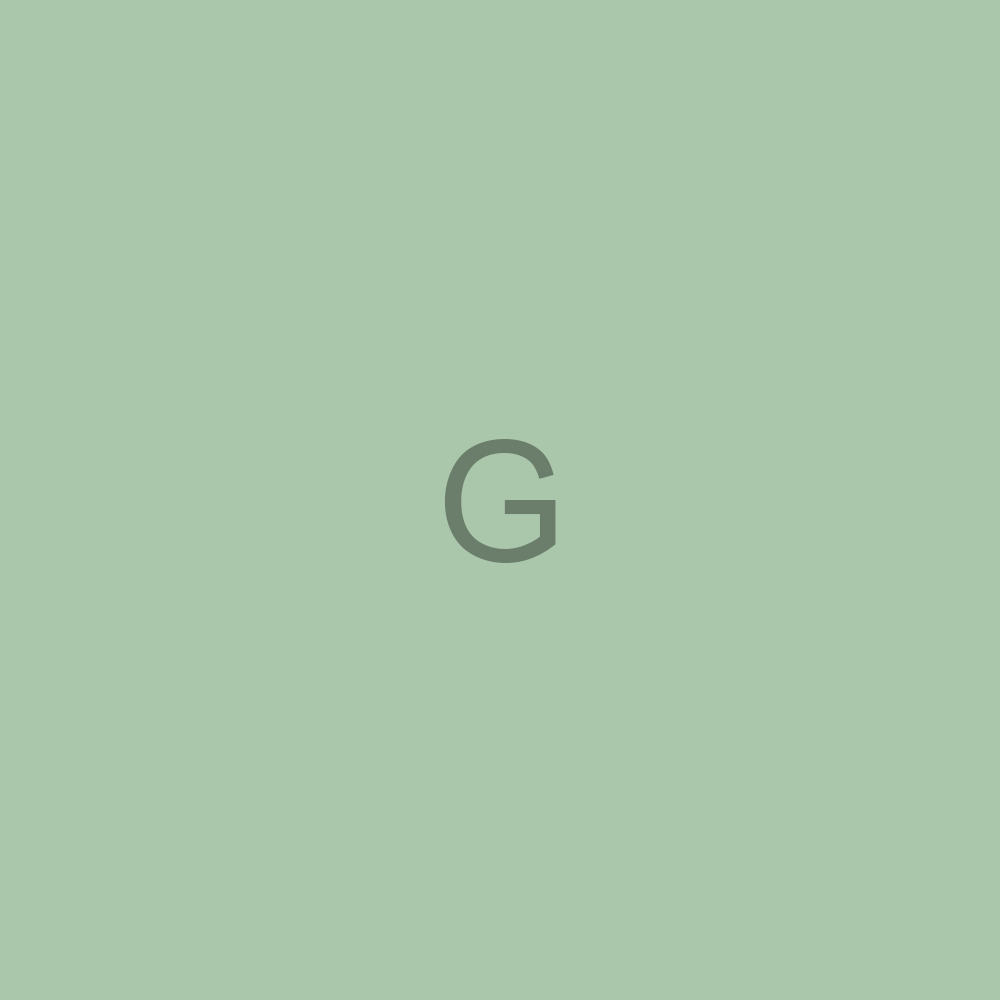
<style>
.page{position:relative;width:1000px;height:1000px;background:#abc7ab}
.page>*{position:absolute;margin:0}
.t1{font:166.7px "ArialMT";color:#6b7e6b}
</style>
<div class="page">
<p class="t1" style="left:444px;top:439px;width:112px;height:124px">G</p>
</div>
